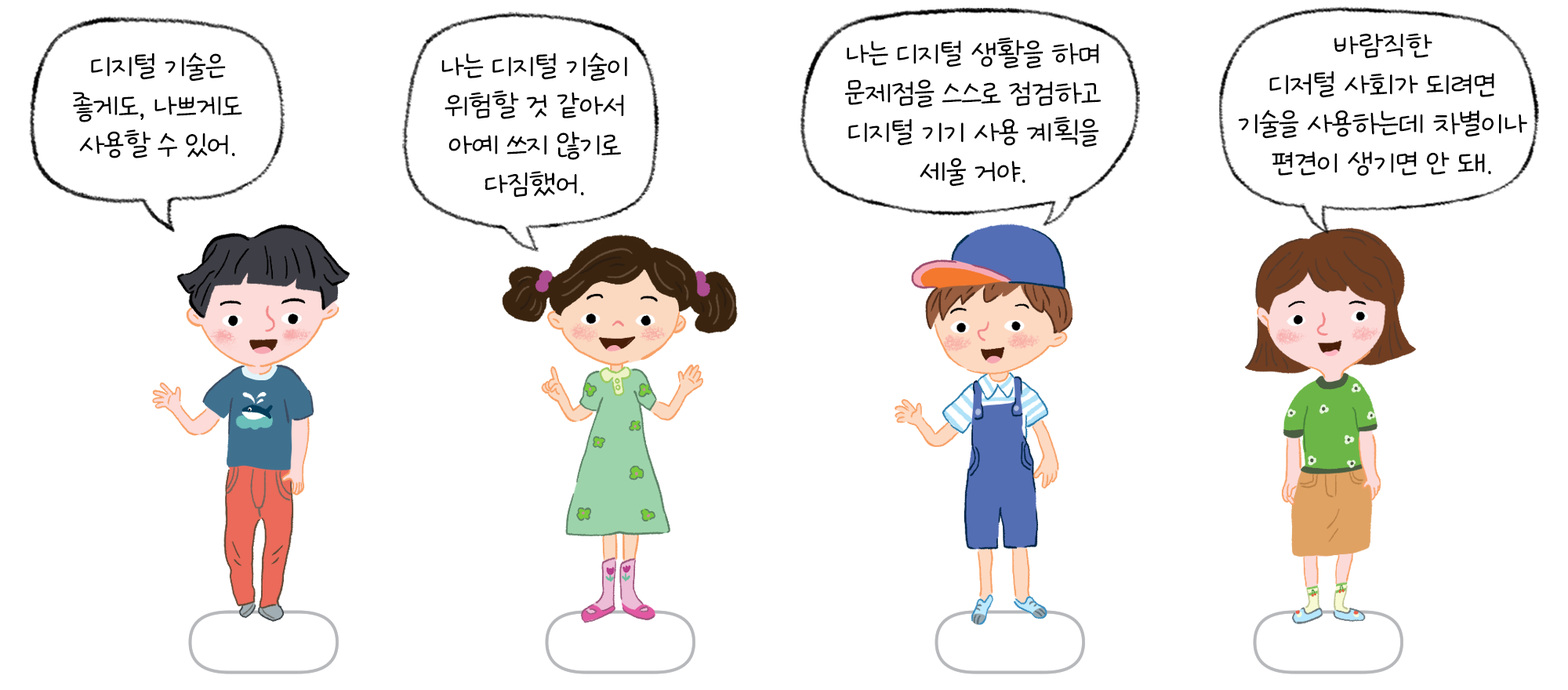
<style>
.page{position:relative;width:1568px;height:690px;background:#ffffff}
.page>*{position:absolute;margin:0}
.t1{font:39.2px/39.2px "GangwonEduSaeeumMedium";letter-spacing:-0.02em;color:#000000}
</style>
<div class="page">
<p class="t1" style="left:844px;top:37px;width:257px;height:150px;text-align:center">나는 디지털 생활을 하며<br>문제점을 스스로 점검하고<br>디지털 기기 사용 계획을<br>세울 거야.</p>
<p class="t1" style="left:1238px;top:33px;width:289px;height:143px;text-align:center">바람직한<br>디저털 사회가 되려면<br>기술을 사용하는데 차별이나<br>편견이 생기면 안 돼.</p>
<p class="t1" style="left:73px;top:53px;width:169px;height:105px;text-align:center">디지털 기술은<br>좋게도, 나쁘게도<br>사용할 수 있어.</p>
<p class="t1" style="left:441px;top:53px;width:186px;height:145px;text-align:center">나는 디지털 기술이<br>위험할 것 같아서<br>아예 쓰지 않기로<br>다짐했어.</p>
</div>
